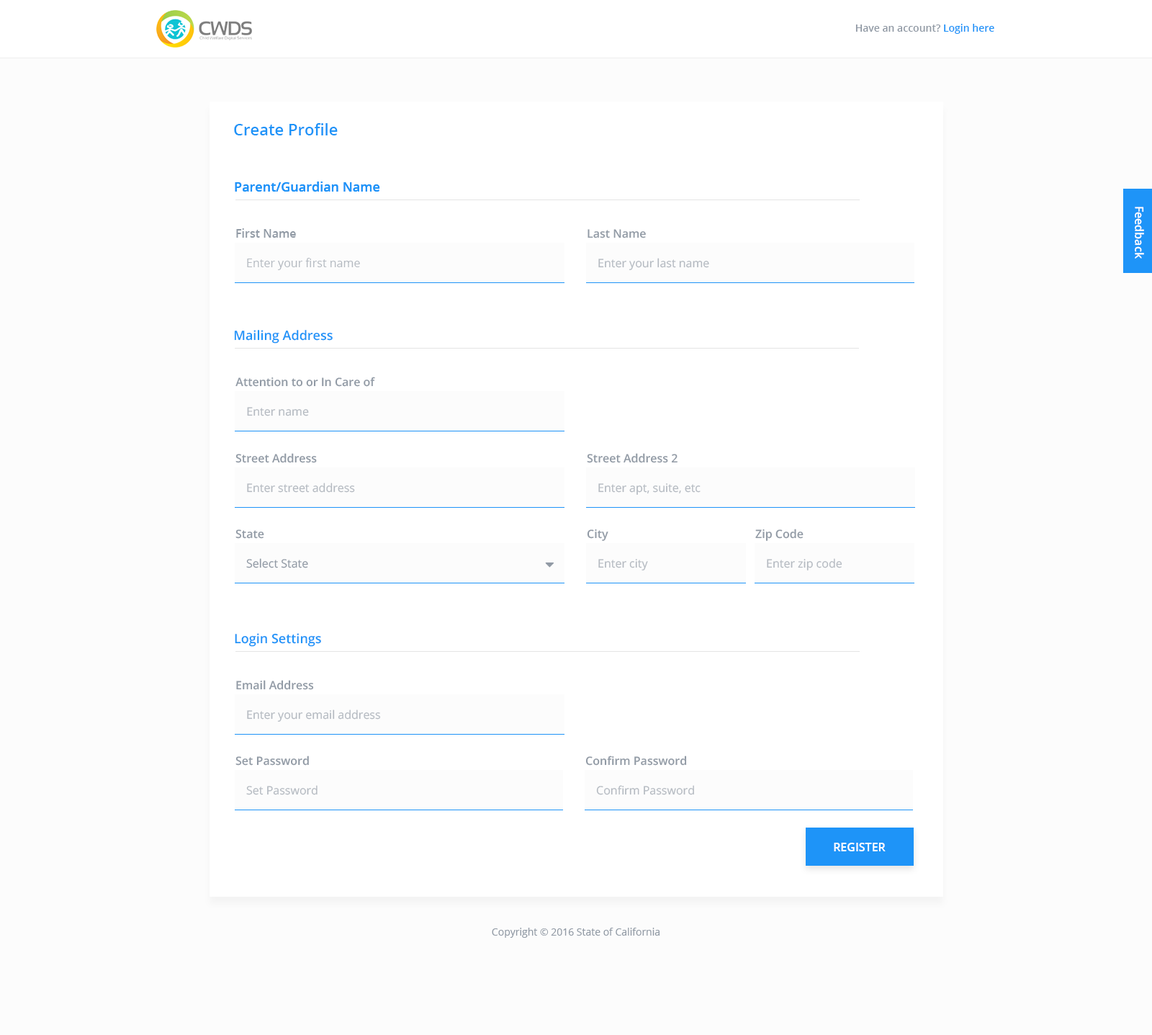
<style>
.page{position:relative;width:1152px;height:1035px;background:#fcfcfc}
.page>*{position:absolute;margin:0}
.t1{font:10.1px "OpenSans-Semibold";color:#919aa5}
.t2{font:10.1px "OpenSans-Semibold";color:#1e94f8}
.t3{font:15.8px "OpenSans-Semibold";color:#1e94f8}
.t4{font:13px "OpenSans-Semibold";color:#1e94f8}
.t5{font:11.5px "OpenSans-Semibold";color:#ffffff}
.t6{font:11.5px "OpenSans-Semibold";color:#919aa5}
.t7{font:11.5px "OpenSans";color:#b5bac1}
.t8{font:11.5px "OpenSans";color:#919aa5}
.t9{font:11.5px "OpenSans-Semibold";color:#ffffff;text-transform:uppercase}
.t10{font:10.1px "OpenSans";color:#919aa5}
</style>
<div class="page">
<p class="t1" style="left:856px;top:24px;width:139px;height:10px">Have an account? <span class="t2">Login here</span></p>
<p class="t3" style="left:234px;top:123px;width:104px;height:12px">Create Profile</p>
<p class="t4" style="left:235px;top:181px;width:145px;height:11px">Parent/Guardian Name</p>
<p class="t4" style="left:235px;top:181px;width:145px;height:11px">Parent/Guardian Name</p>
<p class="t5" style="left:1135px;top:207px;width:9px;height:52px;rotate:90deg">Feedback</p>
<p class="t6" style="left:236px;top:228px;width:60px;height:10px">First Name</p>
<p class="t6" style="left:588px;top:229px;width:58px;height:9px">Last Name</p>
<p class="t7" style="left:247px;top:258px;width:113px;height:12px">Enter your first name</p>
<p class="t7" style="left:598px;top:258px;width:111px;height:12px">Enter your last name</p>
<p class="t4" style="left:234px;top:330px;width:99px;height:14px">Mailing Address</p>
<p class="t6" style="left:235px;top:377px;width:140px;height:10px">Attention to or In Care of</p>
<p class="t7" style="left:247px;top:407px;width:62px;height:9px">Enter name</p>
<p class="t6" style="left:235px;top:453px;width:82px;height:10px">Street Address</p>
<p class="t6" style="left:587px;top:453px;width:91px;height:10px">Street Address 2</p>
<p class="t7" style="left:247px;top:483px;width:108px;height:10px">Enter street address</p>
<p class="t7" style="left:598px;top:483px;width:103px;height:12px">Enter apt, suite, etc</p>
<p class="t6" style="left:235px;top:529px;width:29px;height:10px">State</p>
<p class="t6" style="left:587px;top:529px;width:22px;height:12px">City</p>
<p class="t6" style="left:755px;top:529px;width:49px;height:12px">Zip Code</p>
<p class="t8" style="left:246px;top:558px;width:62px;height:10px">Select State</p>
<p class="t7" style="left:598px;top:559px;width:50px;height:11px">Enter city</p>
<p class="t7" style="left:767px;top:558px;width:76px;height:12px">Enter zip code</p>
<p class="t4" style="left:235px;top:633px;width:86px;height:14px">Login Settings</p>
<p class="t6" style="left:236px;top:680px;width:78px;height:10px">Email Address</p>
<p class="t7" style="left:247px;top:709px;width:134px;height:13px">Enter your email address</p>
<p class="t6" style="left:235px;top:755px;width:74px;height:11px">Set Password</p>
<p class="t6" style="left:585px;top:755px;width:102px;height:11px">Confirm Password</p>
<p class="t7" style="left:246px;top:785px;width:72px;height:10px">Set Password</p>
<p class="t7" style="left:596px;top:785px;width:98px;height:10px">Confirm Password</p>
<p class="t9" style="left:834px;top:843px;width:52px;height:8px">Register</p>
<p class="t10" style="left:492px;top:928px;width:168px;height:10px">Copyright © 2016 State of California</p>
</div>
